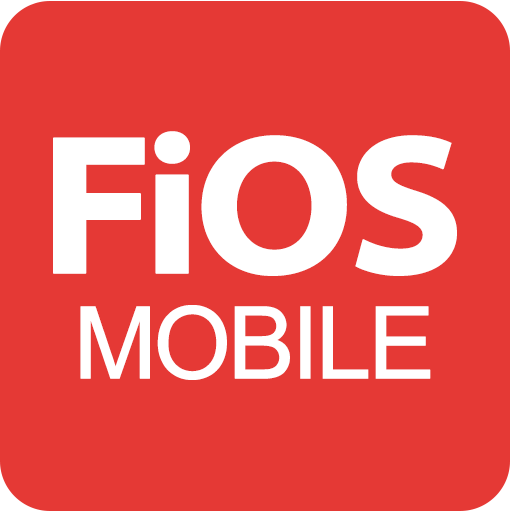
<style>
.page{position:relative;width:512px;height:512px;background:#e53935}
.page>*{position:absolute;margin:0}
.t1{font:200px "MyriadPro-BoldSemiExt";letter-spacing:-0.06em;color:#ffffff;font-weight:bold}
.t2{font:100px "ArialMT";letter-spacing:-0.06em;color:#ffffff;font-weight:bold}
</style>
<div class="page">
<p class="t1" style="left:53px;top:131px;width:404px;height:145px">FiOS</p>
<p class="t2" style="left:80px;top:305px;width:351px;height:75px">MOBILE</p>
</div>
